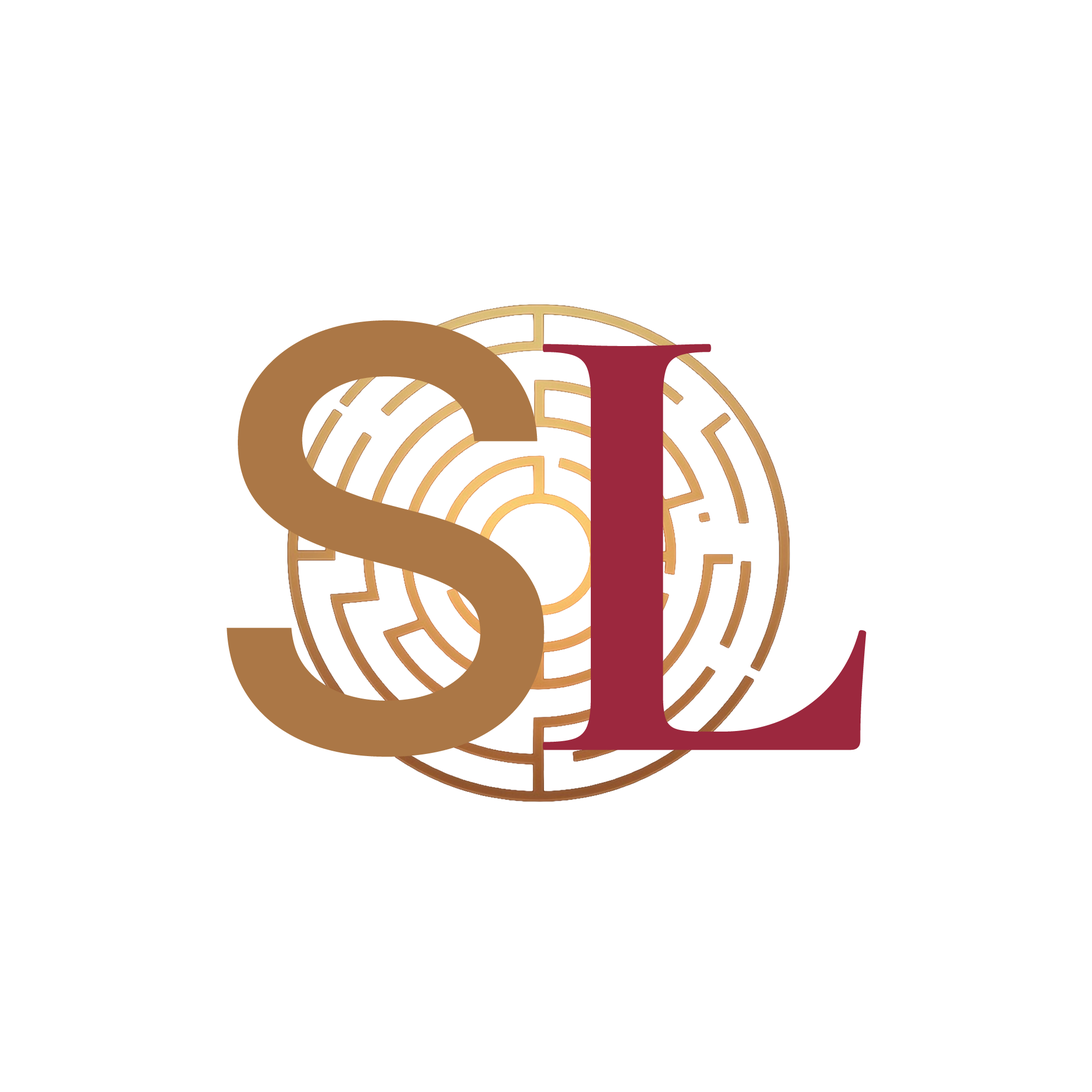
<style>
.page{position:relative;width:1092px;height:1092px;background:#ffffff}
.page>*{position:absolute;margin:0}
.t1{font:582.1px "Inter18pt-Medium";color:#ab7746}
.t2{font:649.1px "Cormorant-Bold";color:#9c283e}
</style>
<div class="page">
<p class="t1" style="left:227px;top:320px;width:317px;height:437px">S</p>
<p class="t2" style="left:543px;top:344px;width:323px;height:406px">L</p>
</div>
